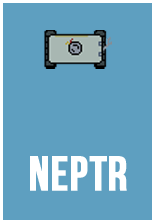
<style>
.page{position:relative;width:155px;height:223px;background:#5e9fc0}
.page>*{position:absolute;margin:0}
.t1{font:48px "BebasNeue";color:#ffffff;font-weight:bold}
</style>
<div class="page">
<p class="t1" style="left:30px;top:156px;width:97px;height:35px">NEPTR</p>
</div>
